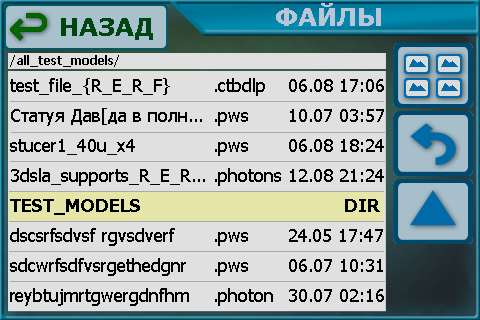
<style>
.page{position:relative;width:480px;height:320px;background:#e0e0e0}
.page>*{position:absolute;margin:0}
.t1{font:24px "Verdana-Bold";color:#bac5d5}
.t2{font:24px "Verdana-Bold";color:#004612}
.t3{font:12px "Tahoma-Bold";color:#000000}
.t4{font:18px/30px "Tahoma";color:#000000}
.t5{font:18px/30px "Tahoma-Bold";color:#000000}
</style>
<div class="page">
<p class="t1" style="left:276px;top:3px;width:105px;height:23px">ФАЙЛЫ</p>
<p class="t2" style="left:61px;top:18px;width:92px;height:22px">НАЗАД</p>
<p class="t3" style="left:10px;top:55px;width:109px;height:12px">/all_test_models/</p>
<p class="t4" style="left:10px;top:78px;width:195px;height:228px">test_file_{R_E_R_F}<br>Статуя Дав[да в полн...<br>stucer1_40u_x4<br>3dsla_supports_R_E_R...<br><span class="t5">TEST_MODELS<br></span>dscsrfsdvsf rgvsdverf<br>sdcwrfsdfvsrgethedgnr<br>reybtujmrtgwergdnfhm</p>
<p class="t4" style="left:215px;top:78px;width:66px;height:228px">.ctbdlp<br>.pws<br>.pws<br>.photons<br><br>.pws<br>.pws<br>.photon</p>
<p class="t4" style="left:289px;top:79px;width:95px;height:223px;text-align:right">06.08 17:06<br>10.07 03:57<br>06.08 18:24<br>12.08 21:24<br><span class="t5">DIR <br></span>24.05 17:47<br>06.07 10:31<br>30.07 02:16</p>
</div>
